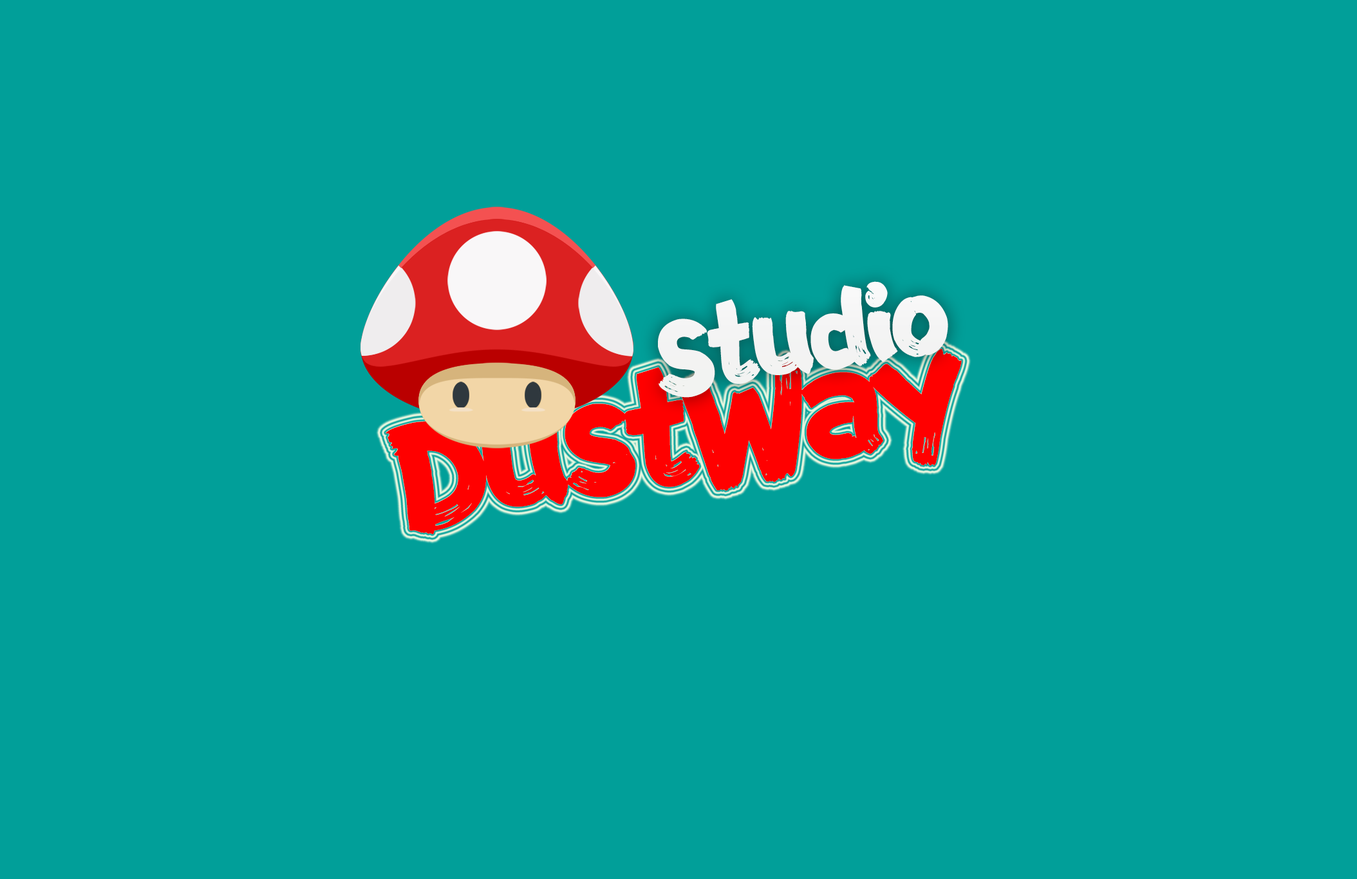
<style>
.page{position:relative;width:1357px;height:879px;background:#019f99}
.page>*{position:absolute;margin:0}
.t1{font:96.5px "FZFENSTXJW--GB1-0";letter-spacing:-0.08em;color:#ffffff}
.t2{font:136.7px "FZFENSTXJW--GB1-0";letter-spacing:-0.08em;color:#ff0000}
</style>
<div class="page">
<p class="t1" style="left:658px;top:281px;width:290px;height:117px;rotate:-9deg">Studio</p>
<p class="t2" style="left:385px;top:349px;width:576px;height:186px;rotate:-9deg">DustWay</p>
</div>
